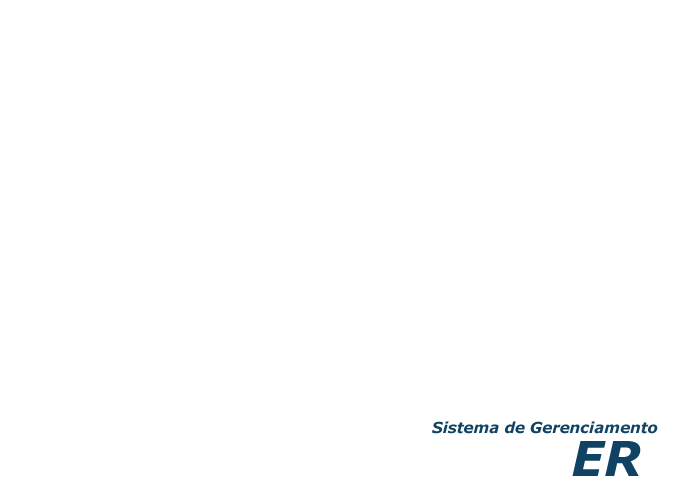
<style>
.page{position:relative;width:700px;height:500px;background:#ffffff}
.page>*{position:absolute;margin:0}
.t1{font:15px "Verdana-BoldItalic";color:#104263}
.t2{font:48px "Verdana-BoldItalic";color:#104263}
</style>
<div class="page">
<p class="t1" style="left:432px;top:421px;width:226px;height:13px">Sistema de Gerenciamento</p>
<p class="t2" style="left:572px;top:441px;width:69px;height:35px">ER</p>
</div>
